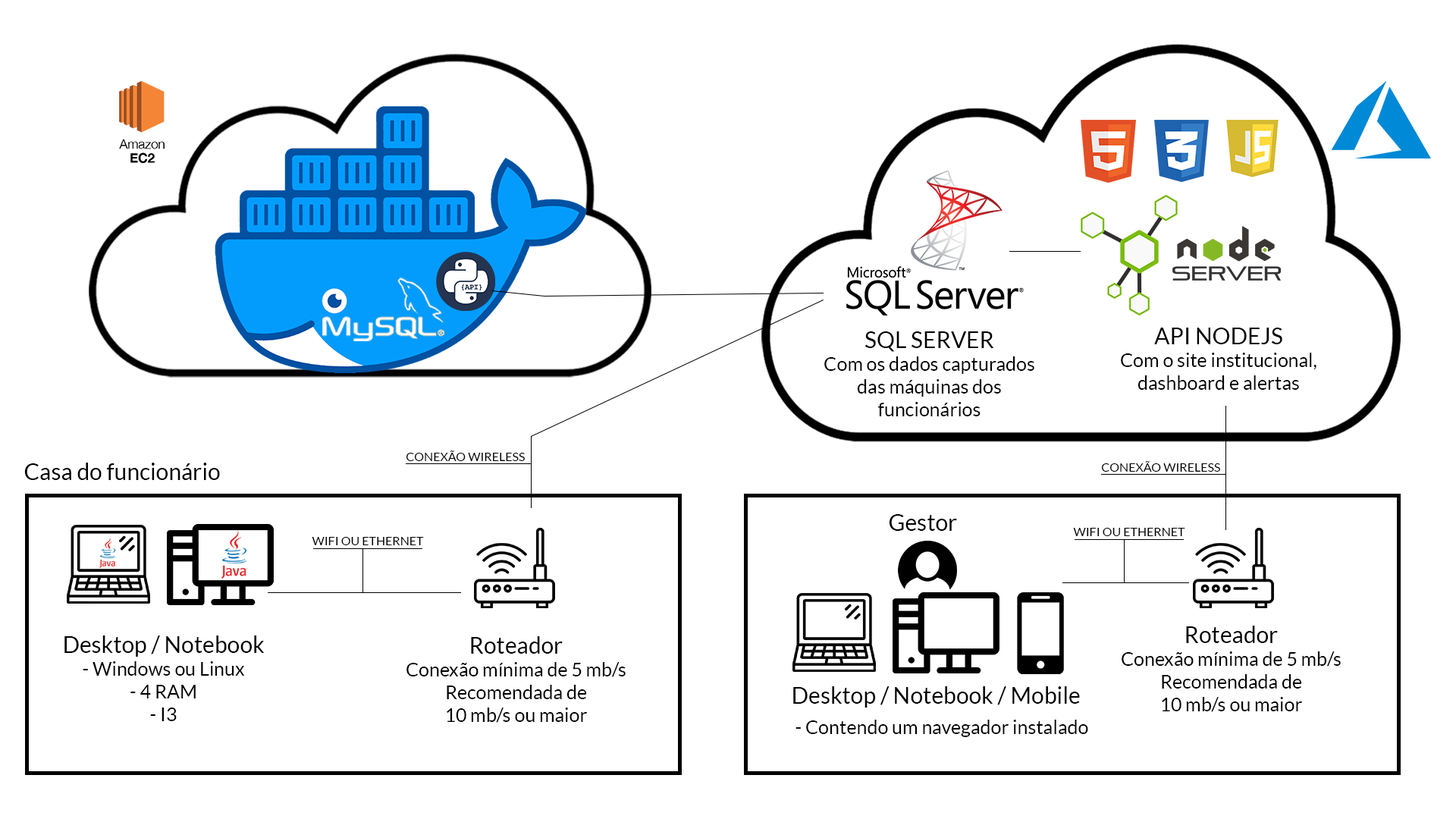
<style>
.page{position:relative;width:1456px;height:819px;background:#ffffff}
.page>*{position:absolute;margin:0}
.t1{font:19px "Lato-Regular";color:#000000}
.t2{font:22.7px "Lato-Regular";color:#000000}
.t3{font:12.1px "Lato-Regular";color:#000000}
</style>
<div class="page">
<p class="t1" style="left:1121px;top:328px;width:195px;height:62px;text-align:center"><span class="t2">API NODEJS<br></span>Com o site institucional,<br>dashboard e alertas</p>
<p class="t1" style="left:824px;top:331px;width:210px;height:85px;text-align:center"><span class="t2">SQL SERVER<br></span>Com os dados capturados<br>das máquinas dos<br>funcionários</p>
<p class="t3" style="left:406px;top:450px;width:119px;height:11px">CONEXÃO WIRELESS</p>
<p class="t3" style="left:1101px;top:461px;width:119px;height:11px">CONEXÃO WIRELESS</p>
<p class="t2" style="left:24px;top:463px;width:196px;height:17px">Casa do funcionário</p>
<p class="t2" style="left:889px;top:514px;width:68px;height:17px">Gestor</p>
<p class="t3" style="left:1073px;top:528px;width:112px;height:8px">WIFI OU ETHERNET</p>
<p class="t3" style="left:312px;top:537px;width:112px;height:8px">WIFI OU ETHERNET</p>
<p class="t1" style="left:1122px;top:626px;width:219px;height:86px;text-align:center"><span class="t2">Roteador<br></span>Conexão mínima de 5 mb/s<br>Recomendada de<br>10 mb/s ou maior</p>
<p class="t1" style="left:64px;top:635px;width:200px;height:86px;text-align:center"><span class="t2">Desktop / Notebook<br></span>- Windows ou Linux<br>- 4 RAM<br>- I3</p>
<p class="t1" style="left:406px;top:636px;width:220px;height:87px;text-align:center"><span class="t2">Roteador<br></span>Conexão mínima de 5 mb/s<br>Recomendada de<br>10 mb/s ou maior</p>
<p class="t2" style="left:793px;top:686px;width:287px;height:22px">Desktop / Notebook / Mobile</p>
<p class="t1" style="left:795px;top:720px;width:293px;height:17px">- Contendo um navegador instalado</p>
</div>
